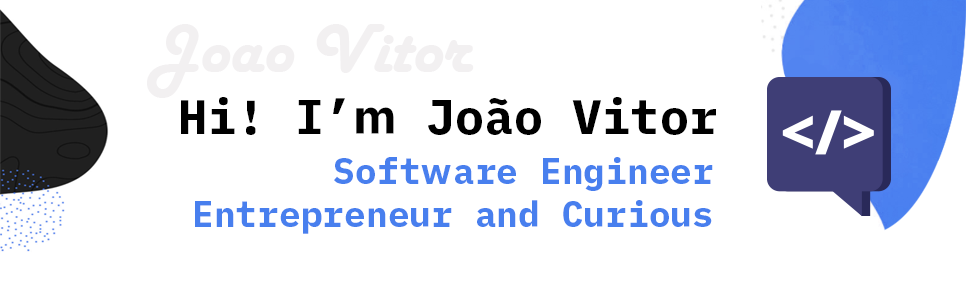
<style>
.page{position:relative;width:966px;height:283px;background:#ffffff}
.page>*{position:absolute;margin:0}
.t1{font:72px "HarlowSolid";color:#f2f0f1}
.t2{font:48.3px "iAWriterDuospace-Bold";color:#000000}
.t3{font:36px "iAWriterDuospace-Bold";color:#487fee}
</style>
<div class="page">
<p class="t1" style="left:147px;top:24px;width:327px;height:74px">Joao Vitor</p>
<p class="t2" style="left:181px;top:97px;width:535px;height:38px">Hi! I’m João Vitor</p>
<p class="t3" style="left:195px;top:157px;width:518px;height:77px">Software Engineer <br>Entrepreneur and Curious</p>
</div>
